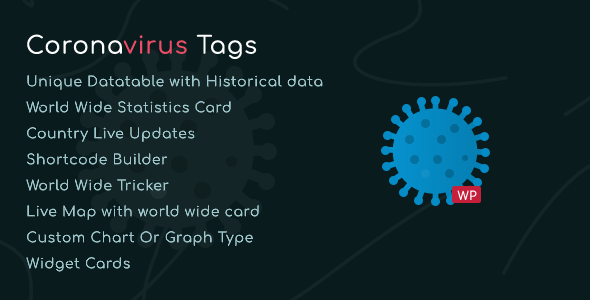
<style>
.page{position:relative;width:590px;height:300px;background:#091b1d}
.page>*{position:absolute;margin:0}
.t1{font:24px "Comfortaa-Regular";letter-spacing:0.04em;color:#ffffff}
.t2{font:24px "Comfortaa-Regular";letter-spacing:0.04em;color:#ed4c67}
.t3{font:14px/26px "Comfortaa-Regular";letter-spacing:0.04em;color:#9fc6ca}
.t4{font:12px "Comfortaa-Regular";letter-spacing:0.04em;color:#ffffff}
</style>
<div class="page">
<p class="t1" style="left:27px;top:34px;width:230px;height:25px">Corona<span class="t2">virus</span> Tags</p>
<p class="t3" style="left:26px;top:75px;width:297px;height:197px">Unique Datatable with Historical data<br>World Wide Statistics Card<br>Country Live Updates<br>Shortcode Builder<br>World Wide Tricker<br>Live Map with world wide card<br>Custom Chart Or Graph Type<br>Widget Cards</p>
<p class="t4" style="left:457px;top:190px;width:20px;height:10px">WP</p>
</div>
